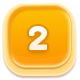
<style>
.page{position:relative;width:80px;height:80px}
.page>*{position:absolute;margin:0}
.t1{font:34.8px "Cartwheel";color:#fdf7ea;scale:1.03 1}
</style>
<div class="page">
<p class="t1" style="left:29px;top:26px;width:18px;height:24px">2</p>
</div>
